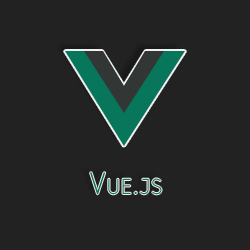
<style>
.page{position:relative;width:250px;height:250px;background:#222222}
.page>*{position:absolute;margin:0}
.t1{font:28px "Variable-Bold";letter-spacing:0.05em;color:#07765b;font-variant:small-caps}
</style>
<div class="page">
<p class="t1" style="left:90px;top:172px;width:72px;height:23px">Vue.js</p>
</div>
